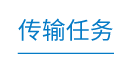
<style>
.page{position:relative;width:126px;height:60px;background:#ffffff}
.page>*{position:absolute;margin:0}
.t1{font:24px "SourceHanSansCN-Regular";color:#057bc6;text-decoration:underline}
</style>
<div class="page">
<p class="t1" style="left:17px;top:18px;width:97px;height:36px">传输任务</p>
</div>
